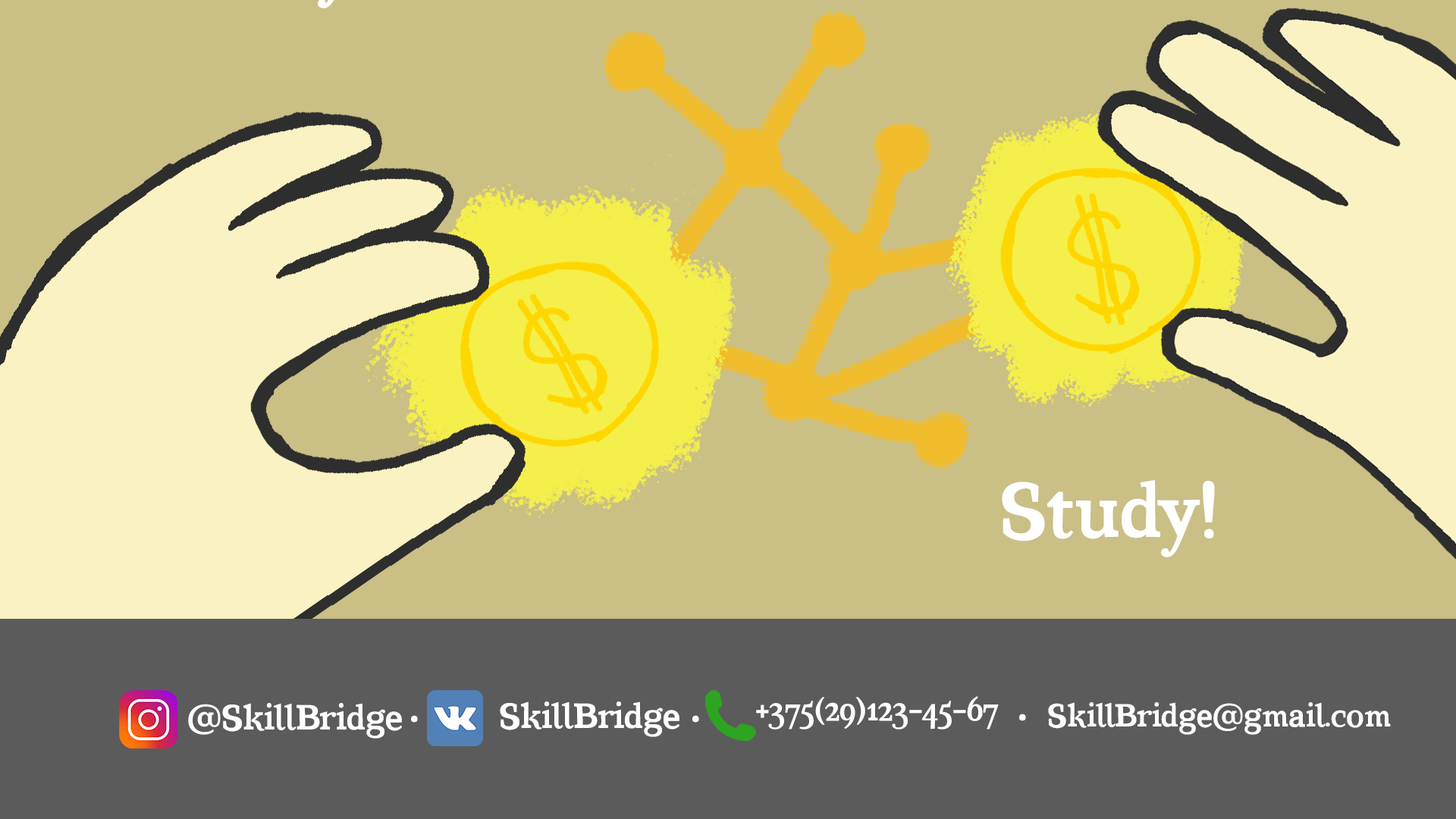
<style>
.page{position:relative;width:1456px;height:819px;background:#cabf85}
.page>*{position:absolute;margin:0}
.t1{font:34.6px "CoatsBold-Bold";color:#ffffff}
.t2{font:31.6px "CoatsBold-Bold";color:#ffffff}
.t3{font:50.9px "CoatsBold-Bold";color:#ffffff}
</style>
<div class="page">
<p class="t1" style="left:500px;top:701px;width:179px;height:36px">SkillBridge</p>
<p class="t2" style="left:756px;top:696px;width:243px;height:34px">+375(29)123-45-67</p>
<p class="t1" style="left:188px;top:703px;width:214px;height:36px">@SkillBridge</p>
<p class="t3" style="left:1019px;top:714px;width:7px;height:7px">.</p>
<p class="t2" style="left:1048px;top:702px;width:343px;height:33px">SkillBridge@gmail.com</p>
<p class="t3" style="left:411px;top:715px;width:7px;height:8px">.</p>
<p class="t3" style="left:692px;top:715px;width:7px;height:8px">.</p>
</div>
